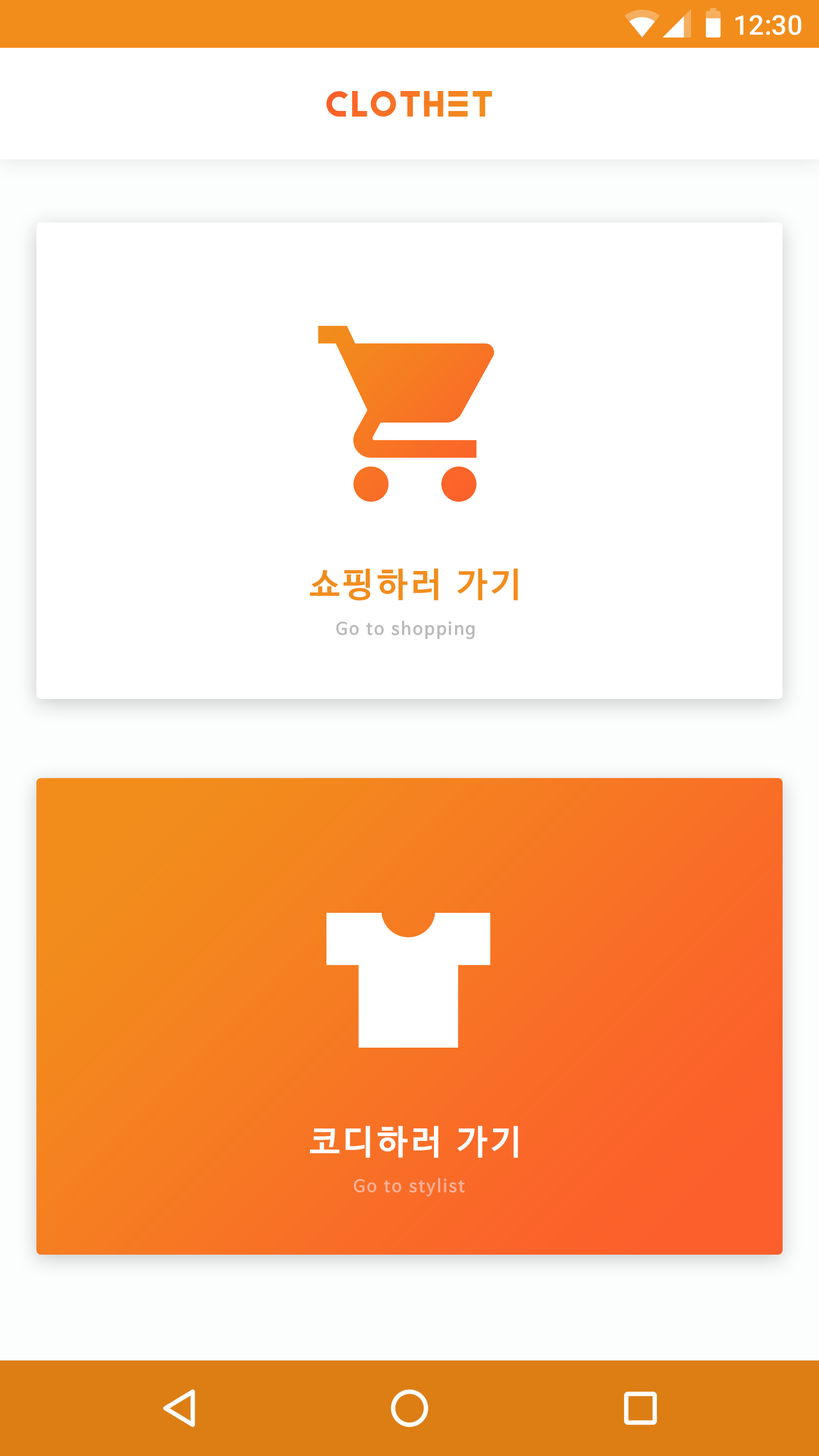
<style>
.page{position:relative;width:819px;height:1456px;background:#ffffff}
.page>*{position:absolute;margin:0}
.t1{font:27.3px "Roboto-Medium";color:#ffffff}
.t2{font:34.3px "NanumBarunGothicBold";letter-spacing:0.1em;color:#f28d1c}
.t3{font:17.1px "NanumBarunGothicBold";letter-spacing:0.1em;color:#b8b8b8}
.t4{font:34.3px "NanumBarunGothicBold";letter-spacing:0.1em;color:#ffffff}
.t5{font:17.1px "NanumBarunGothicBold";letter-spacing:0.1em;color:#fbaf95}
</style>
<div class="page">
<p class="t1" style="left:735px;top:15px;width:66px;height:20px">12:30</p>
<p class="t2" style="left:310px;top:568px;width:208px;height:33px">쇼핑하러 가기</p>
<p class="t3" style="left:336px;top:620px;width:139px;height:19px">Go to shopping</p>
<p class="t4" style="left:310px;top:1126px;width:208px;height:32px">코디하러 가기</p>
<p class="t5" style="left:354px;top:1178px;width:111px;height:19px">Go to stylist</p>
</div>
